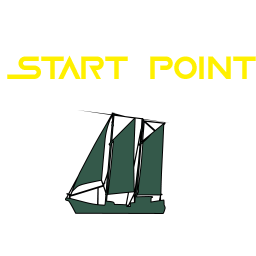
<style>
.page{position:relative;width:256px;height:256px;background:#ffffff}
.page>*{position:absolute;margin:0}
.t1{font:36px "GameOfSquids";color:#fff000;text-transform:uppercase}
</style>
<div class="page">
<p class="t1" style="left:7px;top:55px;width:249px;height:24px">START POINT</p>
</div>
